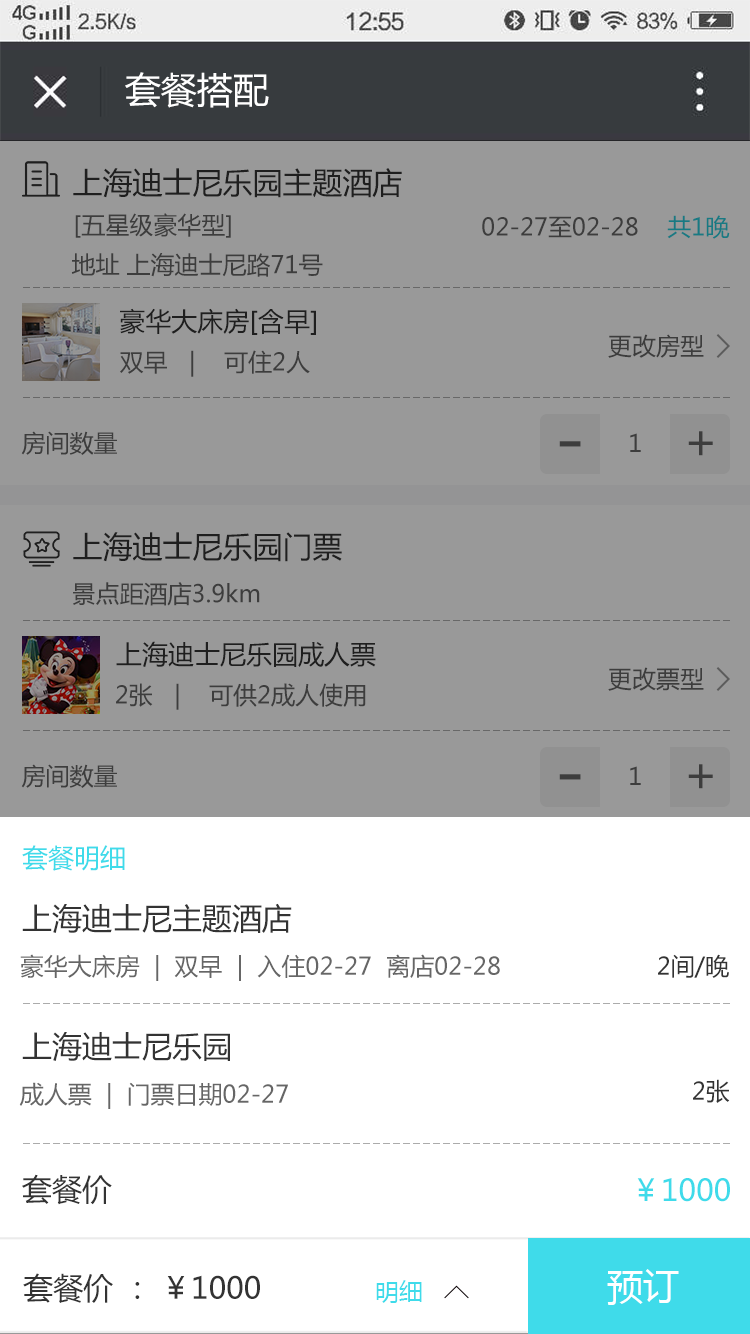
<style>
.page{position:relative;width:750px;height:1334px;background:#999999}
.page>*{position:absolute;margin:0}
.t1{font:36px "MicrosoftYaHei";color:#ffffff}
.t2{font:30px "MicrosoftYaHei";color:#333333}
.t3{font:24px "MicrosoftYaHei";color:#3d3d3d}
.t4{font:24px "MicrosoftYaHei"}
.t5{font:26px "MicrosoftYaHei";color:#333333}
.t6{font:48px "MicrosoftYaHei";color:#3d3d3d}
.t7{font:72px "MicrosoftYaHei";color:#3d3d3d}
.t8{font:26px "MicrosoftYaHei";color:#3fdbea}
.t9{font:24px "MicrosoftYaHei";color:#666666}
.t10{font:24px "MicrosoftYaHei";color:#333333}
.t11{font:30px "MicrosoftYaHei";color:#3fdbea}
.t12{font:24px "MicrosoftYaHei";color:#3fdbea}
</style>
<div class="page">
<p class="t1" style="left:125px;top:72px;width:144px;height:36px">套餐搭配</p>
<p class="t2" style="left:73px;top:168px;width:329px;height:30px">上海迪士尼乐园主题酒店</p>
<p class="t3" style="left:75px;top:213px;width:156px;height:25px">[五星级豪华型]</p>
<p class="t4" style="left:482px;top:215px;width:248px;height:24px">02-27至02-28    共1晚</p>
<p class="t3" style="left:71px;top:253px;width:252px;height:24px">地址 上海迪士尼路71号</p>
<p class="t5" style="left:120px;top:308px;width:196px;height:27px">豪华大床房[含早]</p>
<p class="t3" style="left:608px;top:334px;width:96px;height:24px">更改房型</p>
<p class="t3" style="left:120px;top:350px;width:190px;height:27px">双早   |    可住2人</p>
<p class="t3" style="left:21px;top:431px;width:96px;height:24px">房间数量</p>
<p class="t3" style="left:630px;top:433px;width:11px;height:19px">1</p>
<p class="t6" style="left:688px;top:431px;width:25px;height:25px">+</p>
<p class="t7" style="left:559px;top:441px;width:22px;height:6px">-</p>
<p class="t2" style="left:73px;top:532px;width:269px;height:30px">上海迪士尼乐园门票</p>
<p class="t3" style="left:73px;top:582px;width:187px;height:24px">景点距酒店3.9km</p>
<p class="t5" style="left:116px;top:641px;width:260px;height:26px">上海迪士尼乐园成人票</p>
<p class="t3" style="left:608px;top:667px;width:96px;height:24px">更改票型</p>
<p class="t3" style="left:116px;top:683px;width:250px;height:27px">2张   |    可供2成人使用</p>
<p class="t3" style="left:21px;top:764px;width:96px;height:24px">房间数量</p>
<p class="t7" style="left:559px;top:774px;width:22px;height:6px">-</p>
<p class="t3" style="left:630px;top:766px;width:11px;height:19px">1</p>
<p class="t6" style="left:688px;top:764px;width:25px;height:25px">+</p>
<p class="t8" style="left:22px;top:845px;width:103px;height:26px">套餐明细</p>
<p class="t2" style="left:22px;top:903px;width:270px;height:30px">上海迪士尼主题酒店</p>
<p class="t9" style="left:20px;top:954px;width:480px;height:27px">豪华大床房  |  双早  |  入住02-27  离店02-28</p>
<p class="t10" style="left:658px;top:954px;width:71px;height:24px">2间/晚</p>
<p class="t2" style="left:22px;top:1032px;width:208px;height:29px">上海迪士尼乐园</p>
<p class="t9" style="left:19px;top:1082px;width:269px;height:27px">成人票  |  门票日期02-27</p>
<p class="t10" style="left:693px;top:1079px;width:37px;height:24px">2张</p>
<p class="t2" style="left:22px;top:1174px;width:90px;height:31px">套餐价</p>
<p class="t11" style="left:637px;top:1178px;width:93px;height:24px">￥1000</p>
<p class="t2" style="left:23px;top:1273px;width:237px;height:30px">套餐价 ： ￥1000</p>
<p class="t1" style="left:607px;top:1269px;width:72px;height:36px">预订</p>
<p class="t12" style="left:376px;top:1280px;width:46px;height:23px">明细</p>
</div>
